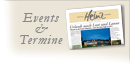
<style>
.page{position:relative;width:130px;height:65px;background:#ebe5d7}
.page>*{position:absolute;margin:0}
.t1{font:14px/11px "Garamond-Italic";letter-spacing:0.05em;color:#888888}
</style>
<div class="page">
<p class="t1" style="left:20px;top:13px;width:43px;height:31px;text-align:center">Events<br>&amp;<br>Termine</p>
</div>
